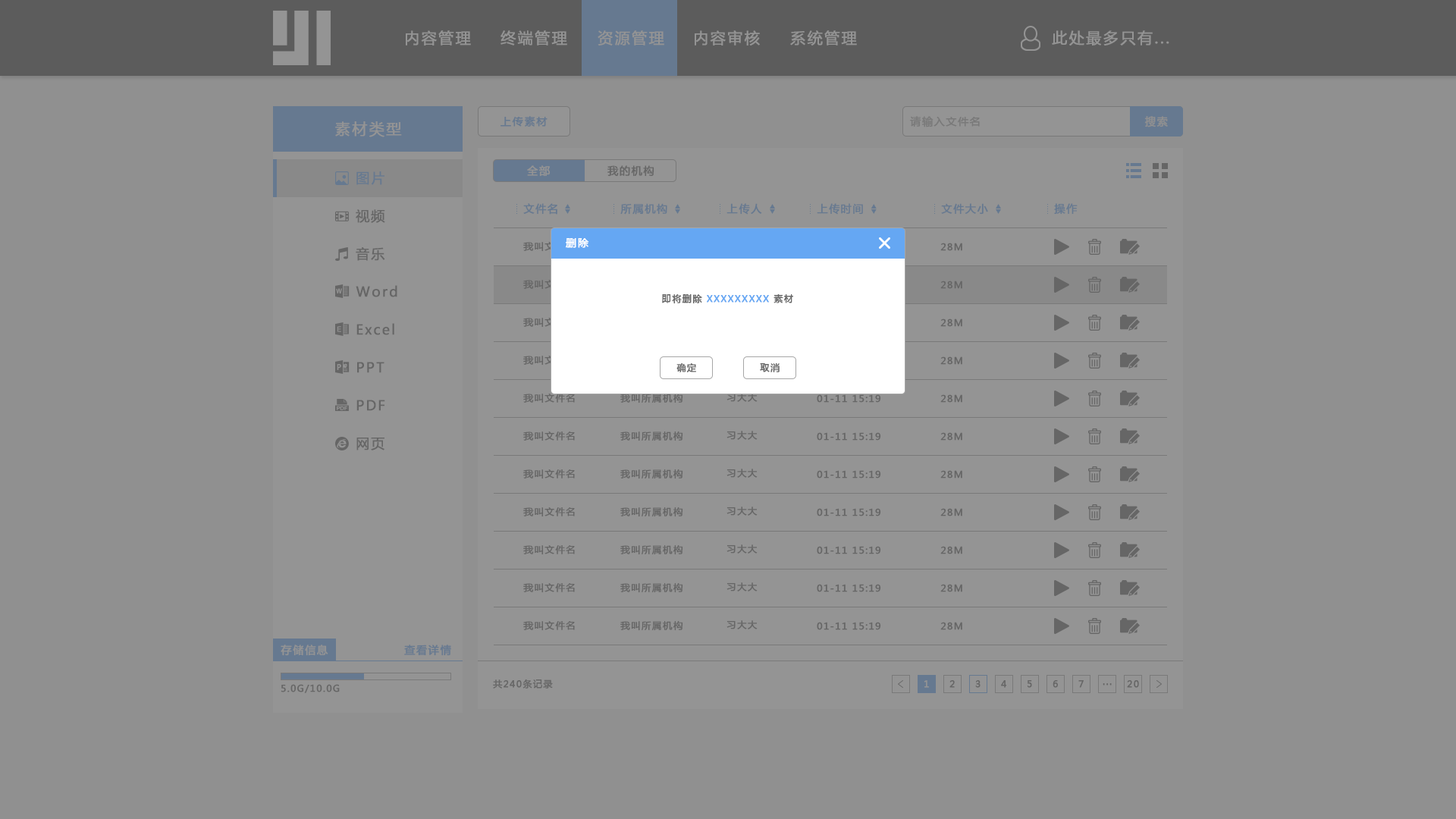
<style>
.page{position:relative;width:1456px;height:819px;background:#909090}
.page>*{position:absolute;margin:0}
.t1{font:15.2px "MicrosoftYaHei";letter-spacing:0.1em;color:#949494;font-weight:bold}
.t2{font:10.6px "MicrosoftYaHei";letter-spacing:0.1em;color:#667990;font-weight:bold}
.t3{font:10.6px "MicrosoftYaHei";letter-spacing:0.1em;color:#797979;font-weight:bold}
.t4{font:10.6px "MicrosoftYaHei";letter-spacing:0.1em;color:#909090;font-weight:bold}
.t5{font:13.6px "MicrosoftYaHei";letter-spacing:0.1em;color:#667990;font-weight:bold}
.t6{font:10.6px "MicrosoftYaHei";letter-spacing:0.1em;color:#949494;font-weight:bold}
.t7{font:10.6px "MicrosoftYaHei";letter-spacing:0.1em;color:#666666;font-weight:bold}
.t8{font:13.6px "MicrosoftYaHei";letter-spacing:0.1em;color:#666666;font-weight:bold}
.t9{font:10.5px "MicrosoftYaHei";letter-spacing:0.1em;color:#667990;font-weight:bold}
.t10{font:10.6px "MicrosoftYaHei";letter-spacing:0.1em;color:#ffffff;font-weight:bold}
.t11{font:9.1px "MicrosoftYaHei";letter-spacing:0.1em;color:#666666;font-weight:bold}
.t12{font:9.1px "MicrosoftYaHei";letter-spacing:0.1em;color:#65a7f3;font-weight:bold}
.t13{font:9.1px "MicrosoftYaHei";letter-spacing:0.1em;color:#666666;font-weight:bold;scale:1.03 1}
.t14{font:9px "MicrosoftYaHei";letter-spacing:0.1em;color:#666666;font-weight:bold}
.t15{font:9.1px "MicrosoftYaHei";letter-spacing:0.1em;color:#949494;font-weight:bold}
</style>
<div class="page">
<p class="t1" style="left:406px;top:30px;width:65px;height:15px">内容管理</p>
<p class="t1" style="left:500px;top:30px;width:67px;height:15px">终端管理</p>
<p class="t1" style="left:598px;top:30px;width:66px;height:15px">资源管理</p>
<p class="t1" style="left:695px;top:30px;width:65px;height:15px">内容审核</p>
<p class="t1" style="left:790px;top:30px;width:67px;height:15px">系统管理</p>
<p class="t1" style="left:1052px;top:30px;width:117px;height:15px">此处最多只有...</p>
<p class="t1" style="left:335px;top:121px;width:67px;height:16px">素材类型</p>
<p class="t2" style="left:500px;top:116px;width:48px;height:11px">上传素材</p>
<p class="t3" style="left:910px;top:116px;width:70px;height:11px">请输入文件名</p>
<p class="t4" style="left:1144px;top:116px;width:24px;height:11px">搜索</p>
<p class="t5" style="left:356px;top:171px;width:28px;height:14px">图片</p>
<p class="t6" style="left:527px;top:165px;width:24px;height:12px">全部</p>
<p class="t7" style="left:607px;top:165px;width:47px;height:12px">我的机构</p>
<p class="t8" style="left:356px;top:209px;width:29px;height:14px">视频</p>
<p class="t2" style="left:523px;top:203px;width:34px;height:12px">文件名</p>
<p class="t9" style="left:620px;top:203px;width:47px;height:12px">所属机构</p>
<p class="t9" style="left:726px;top:203px;width:36px;height:12px">上传人</p>
<p class="t9" style="left:817px;top:203px;width:46px;height:12px">上传时间</p>
<p class="t9" style="left:941px;top:203px;width:47px;height:12px">文件大小</p>
<p class="t2" style="left:1054px;top:203px;width:24px;height:12px">操作</p>
<p class="t10" style="left:566px;top:238px;width:23px;height:10px">删除</p>
<p class="t11" style="left:940px;top:243px;width:22px;height:8px">28M</p>
<p class="t8" style="left:356px;top:247px;width:29px;height:14px">音乐</p>
<p class="t11" style="left:940px;top:281px;width:22px;height:8px">28M</p>
<p class="t8" style="left:356px;top:285px;width:41px;height:12px">Word</p>
<p class="t12" style="left:662px;top:293px;width:131px;height:11px"><span class="t11">即将删除 </span>XXXXXXXXX <span class="t11">素材</span></p>
<p class="t8" style="left:356px;top:323px;width:38px;height:12px">Excel</p>
<p class="t11" style="left:940px;top:318px;width:22px;height:9px">28M</p>
<p class="t8" style="left:357px;top:362px;width:27px;height:11px">PPT</p>
<p class="t11" style="left:676px;top:363px;width:20px;height:9px">确定</p>
<p class="t11" style="left:760px;top:362px;width:20px;height:10px">取消</p>
<p class="t11" style="left:940px;top:356px;width:22px;height:9px">28M</p>
<p class="t8" style="left:356px;top:400px;width:29px;height:11px">PDF</p>
<p class="t13" style="left:523px;top:394px;width:52px;height:9px">我叫文件名</p>
<p class="t11" style="left:620px;top:393px;width:63px;height:10px">我叫所属机构</p>
<p class="t11" style="left:726px;top:393px;width:32px;height:9px">习大大</p>
<p class="t11" style="left:817px;top:394px;width:64px;height:9px">01-11 15:19</p>
<p class="t11" style="left:940px;top:394px;width:22px;height:9px">28M</p>
<p class="t8" style="left:356px;top:438px;width:28px;height:12px">网页</p>
<p class="t13" style="left:523px;top:431px;width:52px;height:10px">我叫文件名</p>
<p class="t11" style="left:620px;top:431px;width:63px;height:10px">我叫所属机构</p>
<p class="t11" style="left:726px;top:431px;width:32px;height:9px">习大大</p>
<p class="t11" style="left:817px;top:432px;width:64px;height:9px">01-11 15:19</p>
<p class="t11" style="left:940px;top:432px;width:22px;height:9px">28M</p>
<p class="t13" style="left:523px;top:469px;width:52px;height:10px">我叫文件名</p>
<p class="t11" style="left:620px;top:469px;width:63px;height:10px">我叫所属机构</p>
<p class="t11" style="left:726px;top:469px;width:32px;height:9px">习大大</p>
<p class="t11" style="left:817px;top:470px;width:64px;height:9px">01-11 15:19</p>
<p class="t11" style="left:940px;top:470px;width:22px;height:9px">28M</p>
<p class="t13" style="left:523px;top:507px;width:52px;height:10px">我叫文件名</p>
<p class="t11" style="left:620px;top:507px;width:63px;height:10px">我叫所属机构</p>
<p class="t11" style="left:726px;top:507px;width:32px;height:9px">习大大</p>
<p class="t11" style="left:817px;top:508px;width:64px;height:8px">01-11 15:19</p>
<p class="t11" style="left:940px;top:508px;width:22px;height:8px">28M</p>
<p class="t13" style="left:523px;top:545px;width:52px;height:10px">我叫文件名</p>
<p class="t11" style="left:620px;top:544px;width:63px;height:11px">我叫所属机构</p>
<p class="t11" style="left:726px;top:544px;width:32px;height:10px">习大大</p>
<p class="t11" style="left:817px;top:546px;width:64px;height:8px">01-11 15:19</p>
<p class="t11" style="left:940px;top:546px;width:22px;height:8px">28M</p>
<p class="t13" style="left:523px;top:583px;width:52px;height:10px">我叫文件名</p>
<p class="t11" style="left:620px;top:582px;width:63px;height:11px">我叫所属机构</p>
<p class="t11" style="left:726px;top:582px;width:32px;height:9px">习大大</p>
<p class="t11" style="left:817px;top:584px;width:64px;height:8px">01-11 15:19</p>
<p class="t11" style="left:940px;top:584px;width:22px;height:8px">28M</p>
<p class="t13" style="left:523px;top:621px;width:52px;height:10px">我叫文件名</p>
<p class="t11" style="left:620px;top:620px;width:63px;height:11px">我叫所属机构</p>
<p class="t11" style="left:726px;top:620px;width:32px;height:9px">习大大</p>
<p class="t11" style="left:817px;top:622px;width:64px;height:8px">01-11 15:19</p>
<p class="t11" style="left:940px;top:622px;width:22px;height:8px">28M</p>
<p class="t6" style="left:281px;top:645px;width:47px;height:11px">存储信息</p>
<p class="t2" style="left:404px;top:645px;width:47px;height:11px">查看详情</p>
<p class="t14" style="left:281px;top:684px;width:59px;height:9px">5.0G/10.0G</p>
<p class="t11" style="left:493px;top:679px;width:60px;height:10px">共240条记录</p>
<p class="t15" style="left:924px;top:680px;width:5px;height:8px">1</p>
<p class="t11" style="left:949px;top:680px;width:6px;height:8px">2</p>
<p class="t11" style="left:975px;top:680px;width:6px;height:8px">3</p>
<p class="t11" style="left:1001px;top:680px;width:6px;height:8px">4</p>
<p class="t11" style="left:1027px;top:680px;width:5px;height:8px">5</p>
<p class="t11" style="left:1053px;top:680px;width:5px;height:8px">6</p>
<p class="t11" style="left:1078px;top:680px;width:6px;height:8px">7</p>
<p class="t11" style="left:1103px;top:683px;width:9px;height:3px">...</p>
<p class="t11" style="left:1127px;top:680px;width:12px;height:8px">20</p>
</div>
